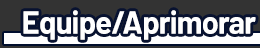
<style>
.page{position:relative;width:260px;height:48px;background:#333333}
.page>*{position:absolute;margin:0}
.t1{font:32px "Barlow-Bold";letter-spacing:-0.025em;color:#ffffff;scale:0.96 1}
</style>
<div class="page">
<p class="t1" style="left:23px;top:10px;width:233px;height:30px">Equipe/Aprimorar</p>
</div>
